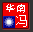
<style>
.page{position:relative;width:33px;height:32px;background:#f20000}
.page>*{position:absolute;margin:0}
.t1{font:10.4px "SimSun";color:#ffffff}
.t2{font:11.7px "SimSun";color:#ffffff}
</style>
<div class="page">
<p class="t1" style="left:6px;top:4px;width:19px;height:9px">华南</p>
<p class="t2" style="left:16px;top:15px;width:11px;height:12px">冯</p>
</div>
